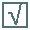
<style>
.page{position:relative;width:30px;height:30px;background:#ffffff}
.page>*{position:absolute;margin:0}
.t1{font:26.7px "MicrosoftYaHei";color:#516f7b}
</style>
<div class="page">
<p class="t1" style="left:8px;top:3px;width:14px;height:22px">√</p>
</div>
